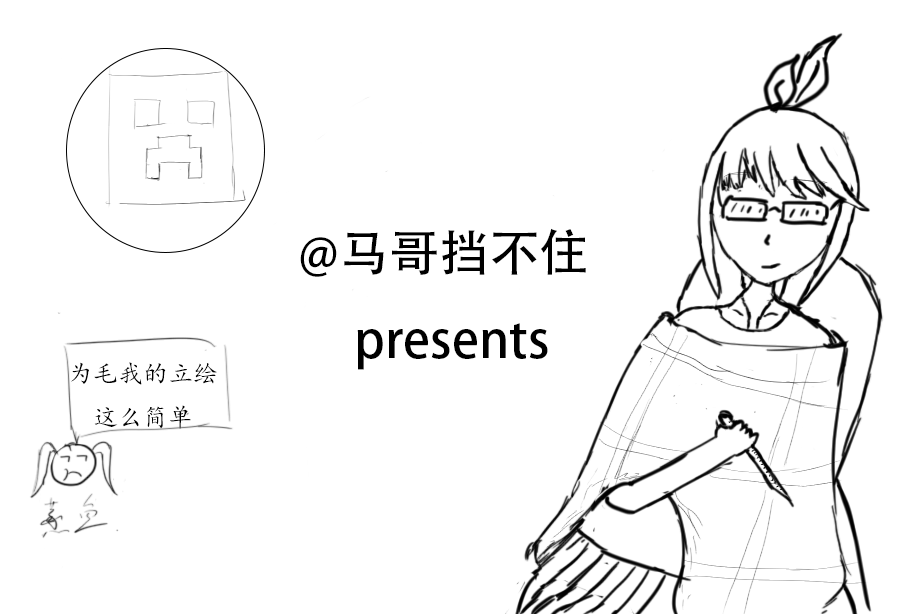
<style>
.page{position:relative;width:912px;height:614px;background:#ffffff}
.page>*{position:absolute;margin:0}
.t1{font:12px "AdobeHeitiStd-Regular";color:#000000}
.t2{font:25px "KaiTi";color:#000000}
</style>
<div class="page">
<p class="t1" style="left:300px;top:228px;width:286px;height:142px">@马哥挡不住<br>     presents</p>
<p class="t2" style="left:71px;top:362px;width:146px;height:67px;text-align:center">为毛我的立绘<br>这么简单</p>
</div>
